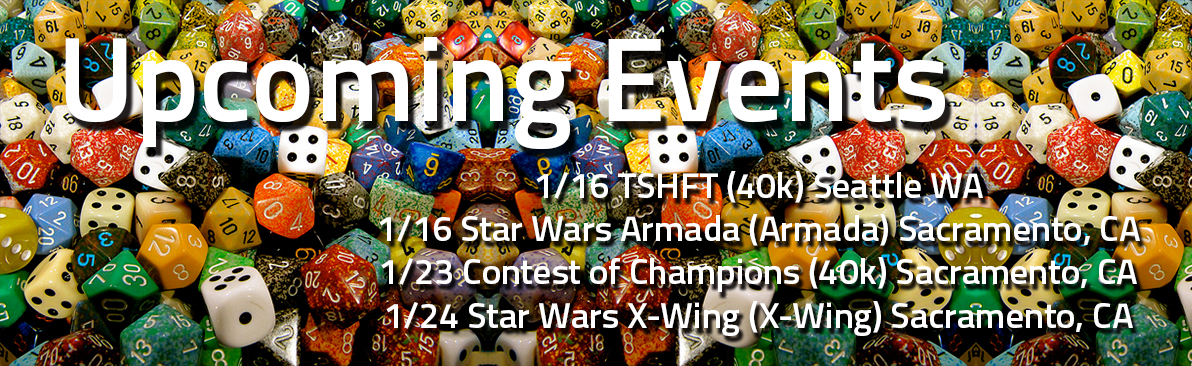
<style>
.page{position:relative;width:1192px;height:366px}
.page>*{position:absolute;margin:0}
.t1{font:120px "Titillium-Semibold";color:#ffffff}
.t2{font:36px "Titillium-Semibold";color:#ffffff}
</style>
<div class="page">
<p class="t1" style="left:65px;top:37px;width:880px;height:113px">Upcoming Events</p>
<p class="t2" style="left:379px;top:171px;width:761px;height:165px;text-align:center">1/16 TSHFT (40k) Seattle WA<br>1/16 Star Wars Armada (Armada) Sacramento, CA<br>1/23 Contest of Champions (40k) Sacramento, CA<br>1/24 Star Wars X-Wing (X-Wing) Sacramento, CA</p>
</div>
